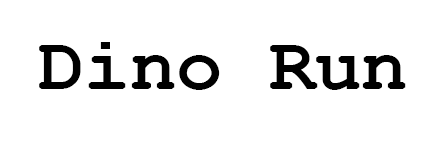
<style>
.page{position:relative;width:424px;height:152px;background:#ffffff}
.page>*{position:absolute;margin:0}
.t1{font:76.9px "CourierNewPS-BoldMT";color:#000000}
</style>
<div class="page">
<p class="t1" style="left:39px;top:42px;width:367px;height:48px">Dino Run</p>
</div>
